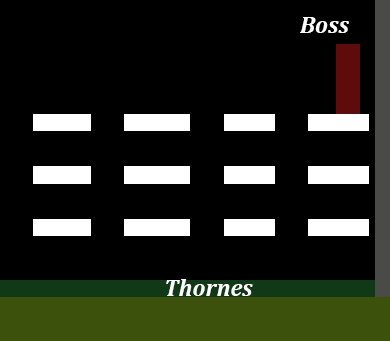
<style>
.page{position:relative;width:390px;height:341px;background:#000000}
.page>*{position:absolute;margin:0}
.t1{font:24px "Cambria-BoldItalic";color:#ffffff}
</style>
<div class="page">
<p class="t1" style="left:300px;top:17px;width:49px;height:16px">Boss</p>
<p class="t1" style="left:166px;top:279px;width:87px;height:17px">Thornes</p>
</div>
